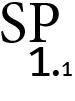
<style>
.page{position:relative;width:75px;height:101px;background:#ffffff}
.page>*{position:absolute;margin:0}
.t1{font:60px "MinionPro-Regular";color:#000000}
.t2{font:42.1px "Bitter-Regular";color:#000000}
.t3{font:44.9px "Bitter-Regular";color:#000000}
.t4{font:20.2px "Bitter-Regular";color:#000000}
</style>
<div class="page">
<p class="t1" style="left:1px;top:2px;width:58px;height:41px">SP</p>
<p class="t2" style="left:29px;top:47px;width:43px;height:29px">1<span class="t3">.</span><span class="t4">1</span></p>
</div>
